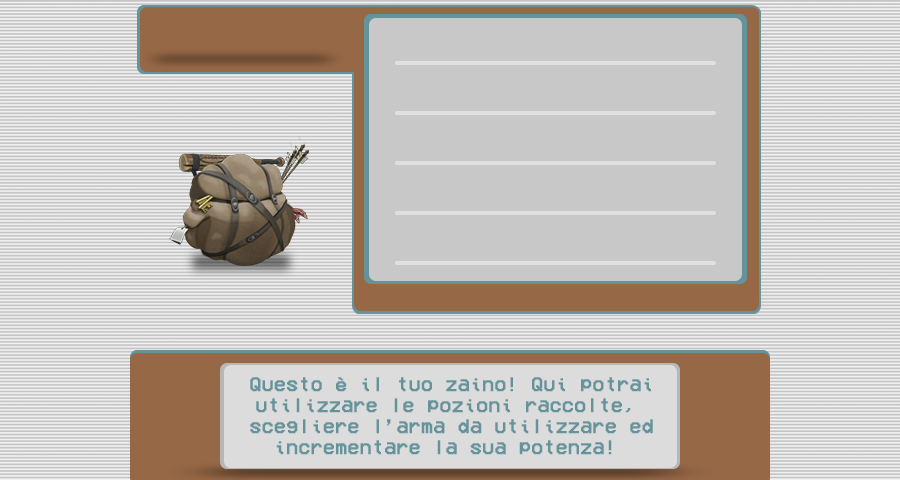
<style>
.page{position:relative;width:900px;height:480px;background:#c8c8c8}
.page>*{position:absolute;margin:0}
.t1{font:20px/21px "VCROSDMono";color:#64939b;font-weight:bold}
</style>
<div class="page">
<p class="t1" style="left:250px;top:377px;width:403px;height:78px;text-align:center">Questo è il tuo zaino! Qui potrai<br>utilizzare le pozioni raccolte, <br>scegliere l’arma da utilizzare ed<br>incrementare la sua potenza!</p>
</div>
